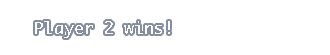
<style>
.page{position:relative;width:330px;height:55px;background:#ffffff}
.page>*{position:absolute;margin:0}
.t1{font:16.7px "Ayuthaya";color:#ffffff}
</style>
<div class="page">
<p class="t1" style="left:35px;top:21px;width:135px;height:17px">Player 2 wins!</p>
</div>
